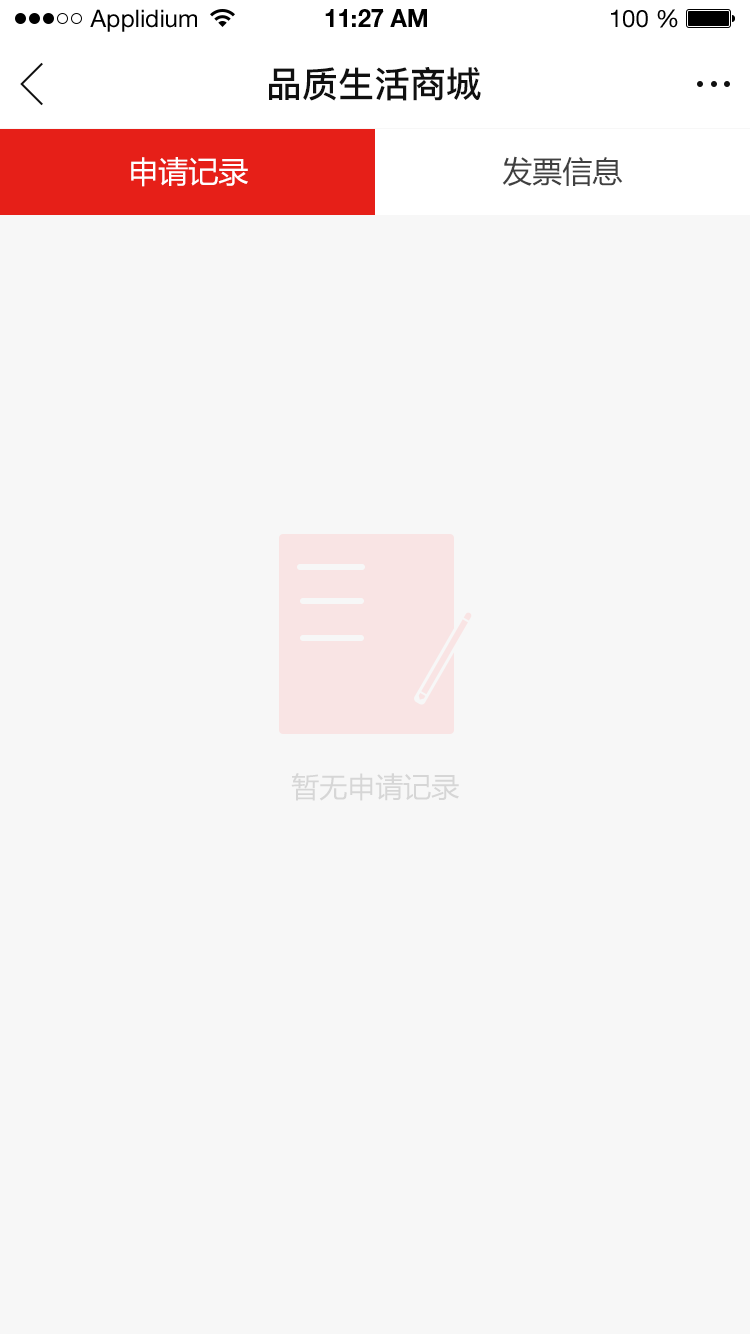
<style>
.page{position:relative;width:750px;height:1334px;background:#f7f7f7}
.page>*{position:absolute;margin:0}
.t1{font:24px "HelveticaNeueLTStd-Roman";color:#000000}
.t2{font:24px "HelveticaNeueLTStd-Bd";color:#000000}
.t3{font:36px "PingFang-SC-Bold";color:#101010;text-transform:uppercase}
.t4{font:30px "MicrosoftYaHei";color:#ffffff;text-transform:uppercase}
.t5{font:30px "MicrosoftYaHei";color:#404040;text-transform:uppercase}
.t6{font:28px "MicrosoftYaHei";color:#d6d6d6;text-transform:uppercase}
</style>
<div class="page">
<p class="t1" style="left:90px;top:9px;width:107px;height:23px">Applidium</p>
<p class="t2" style="left:325px;top:9px;width:102px;height:18px">11:27 AM</p>
<p class="t1" style="left:611px;top:9px;width:67px;height:19px">100 %</p>
<p class="t3" style="left:269px;top:67px;width:212px;height:34px">品质生活商城</p>
<p class="t4" style="left:131px;top:157px;width:117px;height:30px">申请记录</p>
<p class="t5" style="left:502px;top:156px;width:121px;height:30px">发票信息</p>
<p class="t6" style="left:291px;top:773px;width:168px;height:28px">暂无申请记录</p>
</div>
